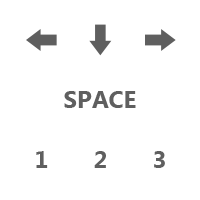
<style>
.page{position:relative;width:200px;height:200px;background:#ffffff}
.page>*{position:absolute;margin:0}
.t1{font:24px "SegoeUI-Bold";color:#5f5f5f}
</style>
<div class="page">
<p class="t1" style="left:64px;top:91px;width:72px;height:17px">SPACE</p>
<p class="t1" style="left:36px;top:151px;width:12px;height:17px">1</p>
<p class="t1" style="left:94px;top:151px;width:12px;height:17px">2</p>
<p class="t1" style="left:154px;top:151px;width:11px;height:17px">3</p>
</div>
